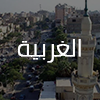
<style>
.page{position:relative;width:100px;height:100px}
.page>*{position:absolute;margin:0}
.t1{font:24px "Cairo-Light";letter-spacing:-0.005em;color:#ffffff;font-weight:bold}
</style>
<div class="page">
<p class="t1" style="left:17px;top:39px;width:64px;height:24px">الغربية</p>
</div>
